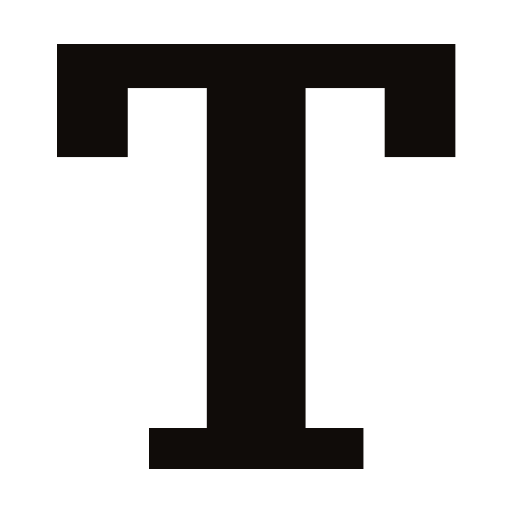
<style>
.page{position:relative;width:512px;height:512px;background:#ffffff}
.page>*{position:absolute;margin:0}
.t1{font:608.6px "IBMPlexSerif-Bold";color:#100c09}
</style>
<div class="page">
<p class="t1" style="left:57px;top:44px;width:399px;height:425px">T</p>
</div>
